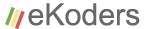
<style>
.page{position:relative;width:148px;height:29px;background:#ffffff}
.page>*{position:absolute;margin:0}
.t1{font:30.3px "ArialUnicodeMS";color:#686868}
</style>
<div class="page">
<p class="t1" style="left:28px;top:3px;width:112px;height:23px">eKoders</p>
</div>
